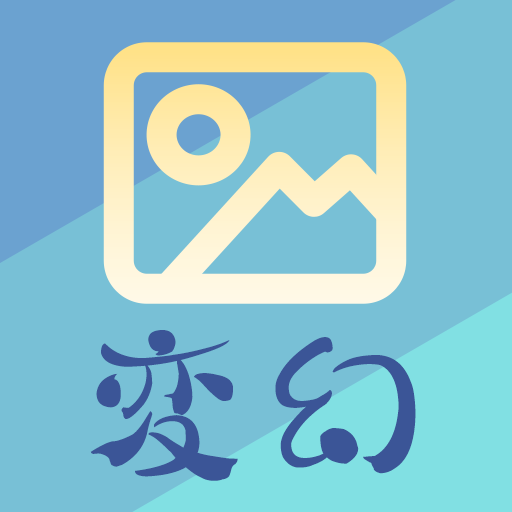
<style>
.page{position:relative;width:512px;height:512px;background:#78c0d6}
.page>*{position:absolute;margin:0}
.t1{font:181.3px "DFSouRyu-W7-WING-RKSJ-H";color:#3b5597}
</style>
<div class="page">
<p class="t1" style="left:90px;top:330px;width:326px;height:151px">変幻</p>
</div>
